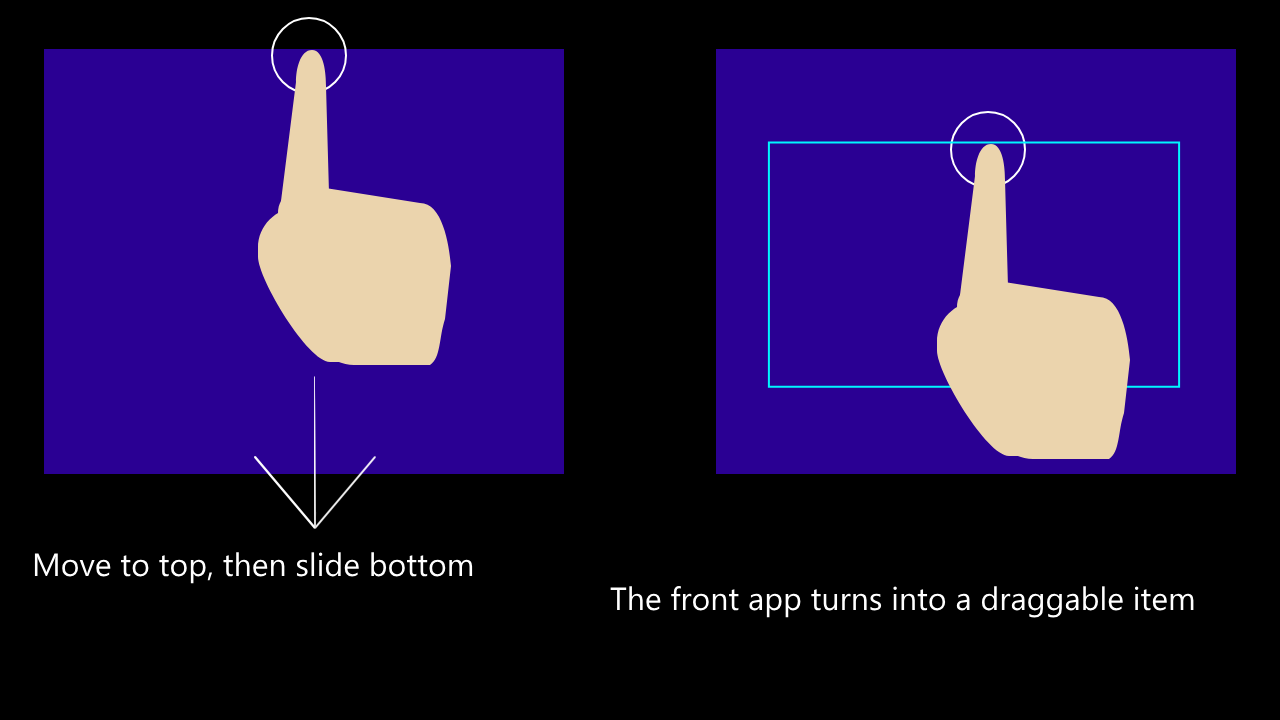
<style>
.page{position:relative;width:1280px;height:720px;background:#000000}
.page>*{position:absolute;margin:0}
.t1{font:32px "SegoeUI";color:#ffffff}
</style>
<div class="page">
<p class="t1" style="left:34px;top:552px;width:439px;height:32px">Move to top, then slide bottom</p>
<p class="t1" style="left:610px;top:585px;width:584px;height:33px">The front app turns into a draggable item</p>
</div>
